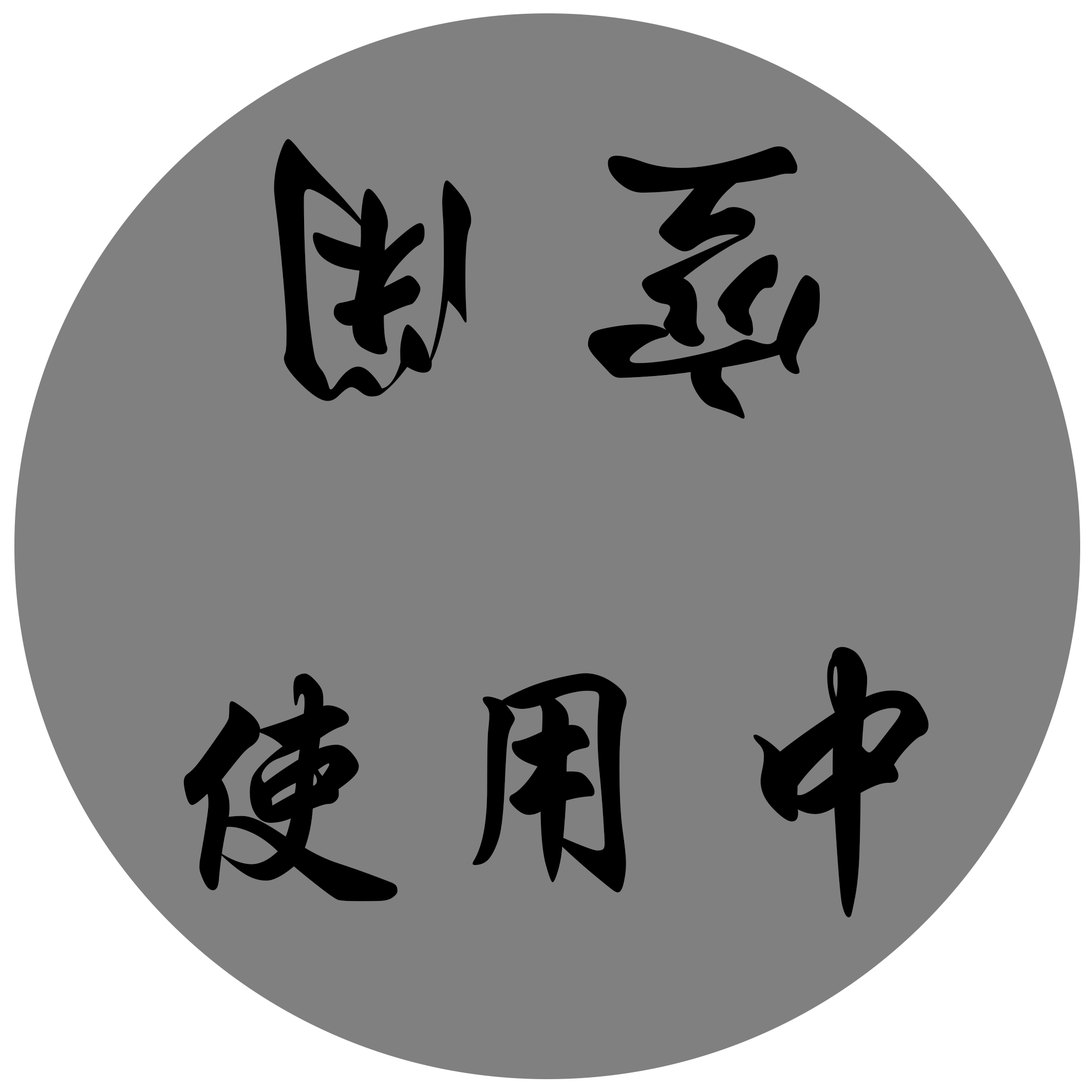
<style>
.page{position:relative;width:1092px;height:1092px;background:#808080}
.page>*{position:absolute;margin:0}
.t1{font:321px "STXingkai";letter-spacing:0.03em;color:#000000}
.t2{font:273.9px "STXingkai";letter-spacing:0.03em;color:#000000}
</style>
<div class="page">
<p class="t1" style="left:274px;top:139px;width:546px;height:280px;rotate:180deg">空闲</p>
<p class="t2" style="left:183px;top:647px;width:746px;height:270px">使用中</p>
</div>
